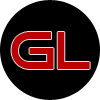
<style>
.page{position:relative;width:100px;height:100px;background:#000000}
.page>*{position:absolute;margin:0}
.t1{font:54.2px "GoodTimes";color:#ba0000;text-transform:uppercase}
</style>
<div class="page">
<p class="t1" style="left:11px;top:32px;width:79px;height:37px">GL</p>
</div>
